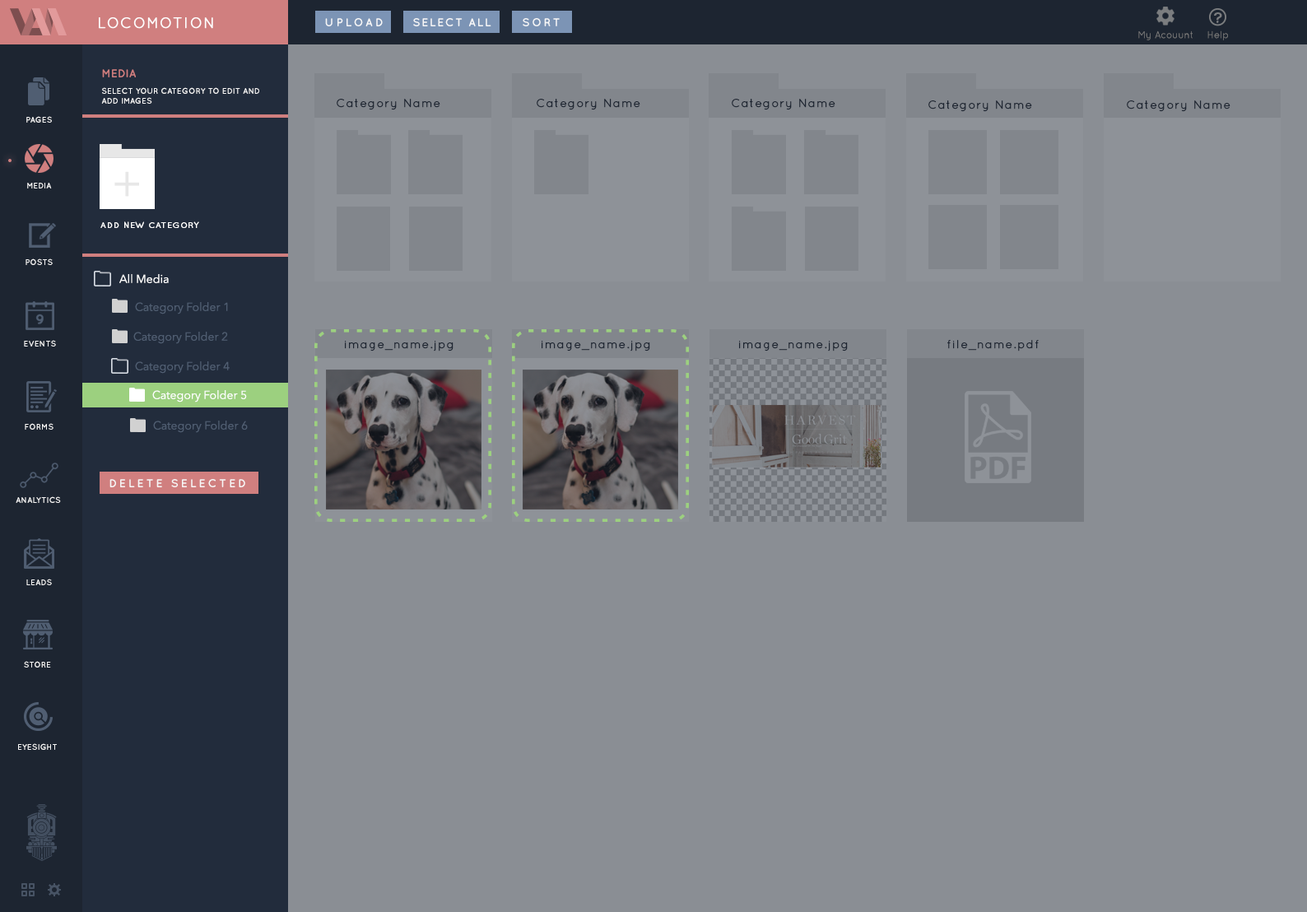
<style>
.page{position:relative;width:1307px;height:912px;background:#8a8e94}
.page>*{position:absolute;margin:0}
.t1{font:14.8px "Quicksand-Regular";letter-spacing:0.07em;color:#ffffff;font-weight:bold}
.t2{font:11.5px "Quicksand-Bold";letter-spacing:0.2em;color:#f7f7f7;text-transform:uppercase}
.t3{font:11.5px "Quicksand-Bold";letter-spacing:0.1em;color:#f7f7f7;text-transform:uppercase}
.t4{font:11.5px "Quicksand-Bold";letter-spacing:0.175em;color:#f7f7f7;text-transform:uppercase}
.t5{font:9.9px "Quicksand-Regular";color:#797979}
.t6{font:11.5px "Quicksand-Bold";color:#d07f7f;text-transform:uppercase}
.t7{font:8.2px/9.9px "Quicksand-Bold";color:#f7f7f7;text-transform:uppercase}
.t8{font:11.5px "Quicksand-Regular";letter-spacing:0.07em;color:#1d2531;font-weight:bold}
.t9{font:8.2px "Quicksand-Bold";color:#f7f7f7;text-transform:uppercase}
.t10{font:8.2px "Quicksand-Regular";letter-spacing:0.07em;color:#ffffff;font-weight:bold}
.t11{font:11.5px "AvenirNext-Regular";color:#ffffff}
.t12{font:11.5px "AvenirNext-Regular";color:#505e72}
</style>
<div class="page">
<p class="t1" style="left:99px;top:17px;width:114px;height:12px">LOCOMOTION</p>
<p class="t2" style="left:325px;top:18px;width:58px;height:8px">UPLOAD</p>
<p class="t3" style="left:413px;top:18px;width:78px;height:8px">SELECT ALL</p>
<p class="t4" style="left:523px;top:18px;width:37px;height:8px">SORT</p>
<p class="t5" style="left:1139px;top:30px;width:54px;height:10px">My Acouunt</p>
<p class="t5" style="left:1208px;top:30px;width:20px;height:10px">Help</p>
<p class="t6" style="left:102px;top:69px;width:34px;height:8px">MEDIA</p>
<p class="t7" style="left:101px;top:87px;width:158px;height:17px">SELECT YOUR CATEGORY TO EDIT AND<br>ADD IMAGES</p>
<p class="t8" style="left:337px;top:99px;width:103px;height:11px">Category Name</p>
<p class="t8" style="left:537px;top:99px;width:103px;height:11px">Category Name</p>
<p class="t8" style="left:732px;top:99px;width:104px;height:11px">Category Name</p>
<p class="t8" style="left:929px;top:100px;width:103px;height:12px">Category Name</p>
<p class="t8" style="left:1127px;top:100px;width:104px;height:12px">Category Name</p>
<p class="t9" style="left:26px;top:116px;width:26px;height:7px">pages</p>
<p class="t9" style="left:27px;top:183px;width:25px;height:6px">MEDIA</p>
<p class="t10" style="left:100px;top:221px;width:99px;height:7px">ADD NEW CATEGORY</p>
<p class="t9" style="left:26px;top:258px;width:27px;height:7px">POSTS</p>
<p class="t11" style="left:119px;top:274px;width:50px;height:9px">All Media</p>
<p class="t12" style="left:135px;top:302px;width:93px;height:12px">Category Folder 1</p>
<p class="t9" style="left:24px;top:340px;width:32px;height:7px">EVENTS</p>
<p class="t12" style="left:133px;top:332px;width:95px;height:12px">Category Folder 2</p>
<p class="t8" style="left:345px;top:341px;width:109px;height:11px">image_name.jpg</p>
<p class="t8" style="left:542px;top:341px;width:108px;height:11px">image_name.jpg</p>
<p class="t8" style="left:739px;top:341px;width:109px;height:11px">image_name.jpg</p>
<p class="t8" style="left:948px;top:340px;width:91px;height:12px">file_name.pdf</p>
<p class="t12" style="left:135px;top:361px;width:95px;height:13px">Category Folder 4</p>
<p class="t11" style="left:152px;top:390px;width:95px;height:13px">Category Folder 5</p>
<p class="t9" style="left:25px;top:423px;width:29px;height:7px">FORMS</p>
<p class="t12" style="left:153px;top:421px;width:95px;height:12px">Category Folder 6</p>
<p class="t2" style="left:109px;top:479px;width:136px;height:8px">DELETE SELECTED</p>
<p class="t9" style="left:16px;top:496px;width:45px;height:7px">ANALYTICS</p>
<p class="t9" style="left:26px;top:579px;width:26px;height:6px">LEADS</p>
<p class="t9" style="left:24px;top:661px;width:27px;height:7px">STORE</p>
<p class="t9" style="left:18px;top:743px;width:39px;height:7px">EYESIGHT</p>
</div>
